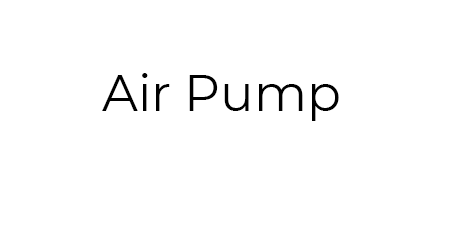
<style>
.page{position:relative;width:455px;height:238px;background:#ffffff}
.page>*{position:absolute;margin:0}
.t1{font:50px "Montserrat-Regular";color:#000000}
</style>
<div class="page">
<p class="t1" style="left:102px;top:73px;width:237px;height:48px">Air Pump</p>
</div>
